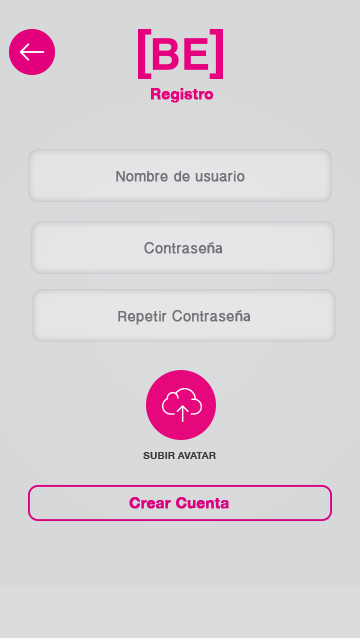
<style>
.page{position:relative;width:360px;height:640px}
.page>*{position:absolute;margin:0}
.t1{font:15px "HelveticaNeue-Bold";color:#e6007e;font-weight:bold}
.t2{font:15px "MyanmarSangamMN";color:#727277;font-weight:bold}
.t3{font:15px "MyriadPro-Regular";color:#727277;font-weight:bold}
.t4{font:10.2px "HelveticaNeue-Bold";color:#3b3b3b;text-transform:uppercase}
.t5{font:15px "HelveticaNeue-Bold";color:#da0080;font-weight:bold}
</style>
<div class="page">
<p class="t1" style="left:151px;top:88px;width:63px;height:15px">Registro</p>
<p class="t2" style="left:116px;top:171px;width:129px;height:11px">Nombre de usuario</p>
<p class="t2" style="left:144px;top:242px;width:79px;height:12px">Contrase<span class="t3">ña</span></p>
<p class="t2" style="left:118px;top:310px;width:133px;height:15px">Repetir Contrase<span class="t3">ña</span></p>
<p class="t4" style="left:143px;top:452px;width:73px;height:7px">Subir Avatar</p>
<p class="t5" style="left:129px;top:497px;width:100px;height:12px">Crear Cuenta</p>
</div>
